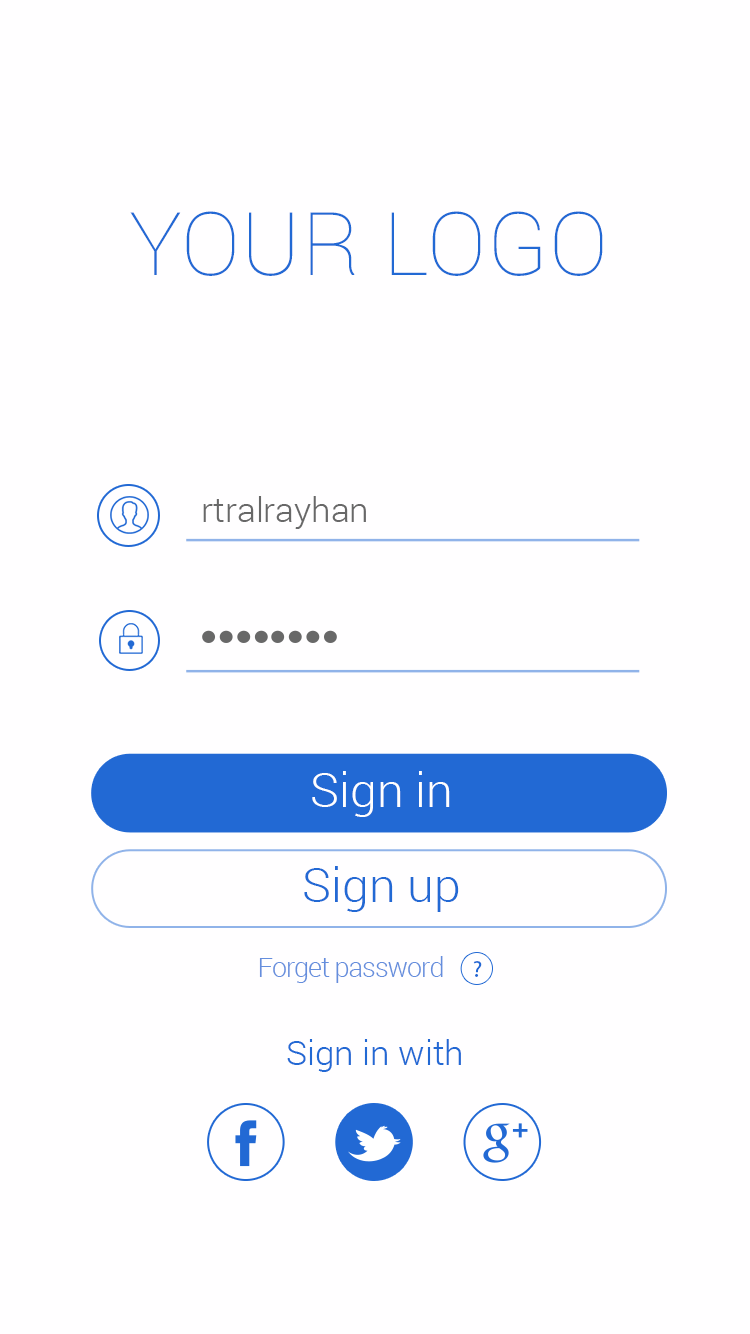
<style>
.page{position:relative;width:750px;height:1334px;background:#fffeff}
.page>*{position:absolute;margin:0}
.t1{font:88.1px "Roboto-Thin";letter-spacing:0.01em;color:#2269d4}
.t2{font:33.7px "Roboto-Light";color:#686868;scale:1.04 1}
.t3{font:46.8px "Roboto-Light";color:#ffffff}
.t4{font:46.8px "Roboto-Light";color:#2269d4}
.t5{font:26.7px "Roboto-Light";letter-spacing:-0.04em;color:#658edd}
.t6{font:22.9px "MyriadPro-Regular";color:#2269d4;scale:1.06 1}
.t7{font:33.7px "Roboto-Light";color:#2269d4;scale:1.04 1}
</style>
<div class="page">
<p class="t1" style="left:130px;top:211px;width:473px;height:65px">YOUR LOGO</p>
<p class="t2" style="left:203px;top:496px;width:163px;height:33px">rtralrayhan</p>
<p class="t3" style="left:312px;top:771px;width:138px;height:46px">Sign in</p>
<p class="t4" style="left:304px;top:866px;width:155px;height:46px">Sign up</p>
<p class="t5" style="left:259px;top:956px;width:184px;height:27px">Forget password</p>
<p class="t6" style="left:473px;top:961px;width:9px;height:16px">?</p>
<p class="t7" style="left:287px;top:1039px;width:174px;height:33px">Sign in with</p>
</div>
